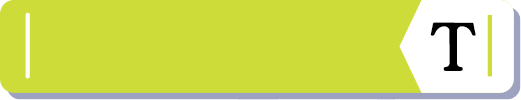
<style>
.page{position:relative;width:521px;height:100px;background:#cddc39}
.page>*{position:absolute;margin:0}
.t1{font:73px "HanWangYanKai";color:#000000}
</style>
<div class="page">
<p class="t1" style="left:430px;top:22px;width:46px;height:49px">T</p>
</div>
